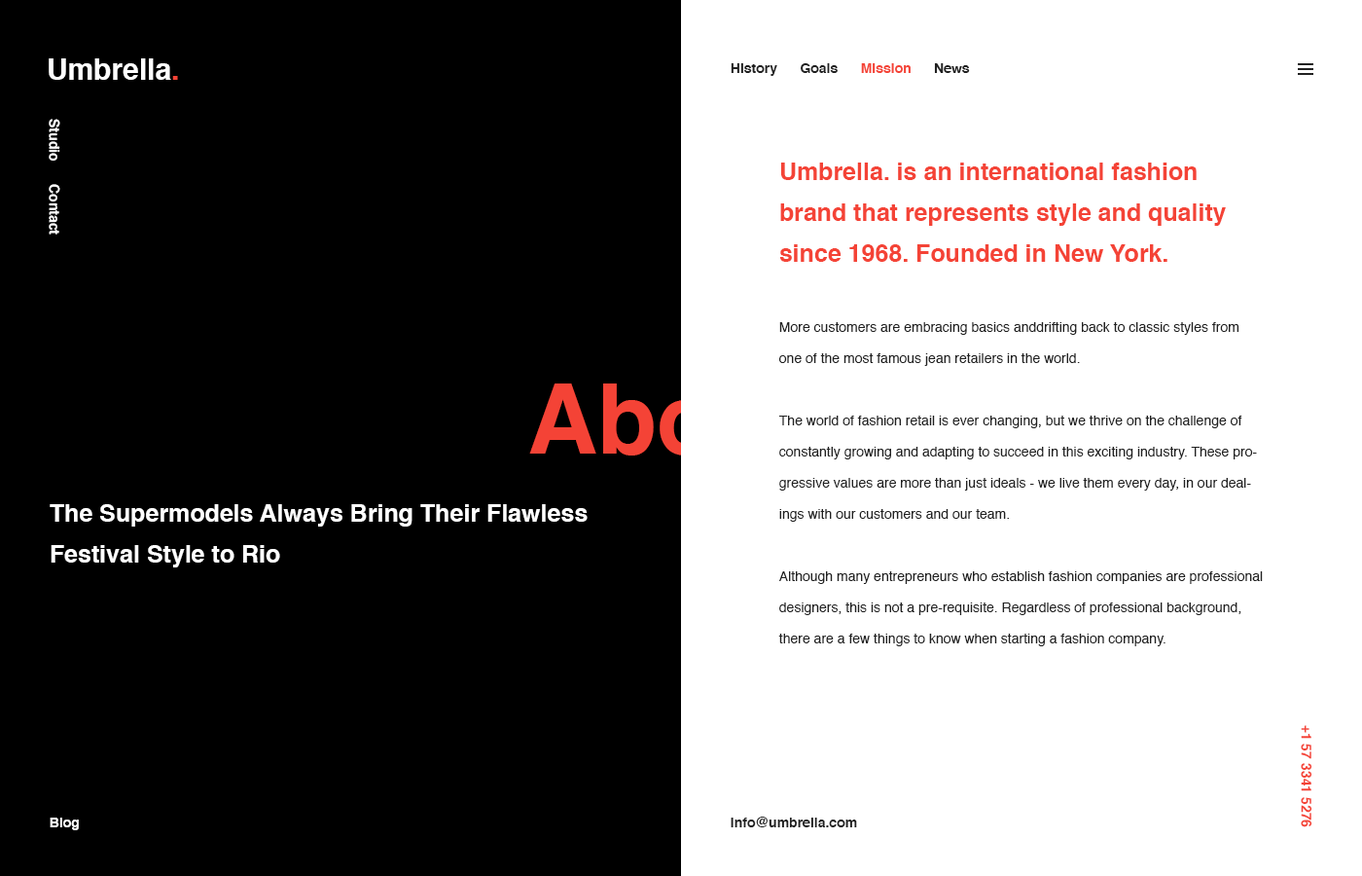
<style>
.page{position:relative;width:1362px;height:876px;background:#000000}
.page>*{position:absolute;margin:0}
.t1{font:29.2px "Helvetica-Bold";color:#ffffff}
.t2{font:29.2px "Helvetica-Bold";color:#f44336}
.t3{font:13.6px "Helvetica-Bold";color:#212121}
.t4{font:13.6px "Helvetica-Bold";color:#f44336}
.t5{font:13.6px "Helvetica-Bold";color:#ffffff}
.t6{font:24.3px/40.9px "Helvetica-Bold";color:#f44336}
.t7{font:13.6px/31.1px "Helvetica";color:#212121}
.t8{font:97.3px "Helvetica-Bold"}
.t9{font:24.3px/40.9px "Helvetica-Bold";color:#ffffff}
</style>
<div class="page">
<p class="t1" style="left:49px;top:58px;width:129px;height:22px">Umbrella<span class="t2">.</span></p>
<p class="t3" style="left:731px;top:63px;width:239px;height:13px">History      Goals      <span class="t4">Mission</span>      News</p>
<p class="t5" style="left:49px;top:119px;width:11px;height:115px;rotate:90deg">Studio      Contact</p>
<p class="t6" style="left:779px;top:162px;width:447px;height:100px">Umbrella. is an international fashion brand that represents style and quality since 1968. Founded in New York.</p>
<p class="t7" style="left:778px;top:322px;width:485px;height:324px">More customers are embracing basics anddrifting back to classic styles from one of the most famous jean retailers in the world.<br><br>The world of fashion retail is ever changing, but we thrive on the challenge of constantly growing and adapting to succeed in this exciting industry. These progressive values are more than just ideals - we live them every day, in our dealings with our customers and our team.<br><br>Although many entrepreneurs who establish fashion companies are professional designers, this is not a pre-requisite. Regardless of professional background, there are a few things to know when starting a fashion company.</p>
<p class="t8" style="left:529px;top:383px;width:300px;height:72px">About.</p>
<p class="t9" style="left:50px;top:504px;width:538px;height:63px">The Supermodels Always Bring Their Flawless Festival Style to Rio</p>
<p class="t4" style="left:1301px;top:725px;width:11px;height:102px;rotate:90deg">+1 57 3341 5276</p>
<p class="t5" style="left:50px;top:817px;width:29px;height:13px">Blog</p>
<p class="t3" style="left:731px;top:816px;width:126px;height:11px">info@umbrella.com</p>
</div>
